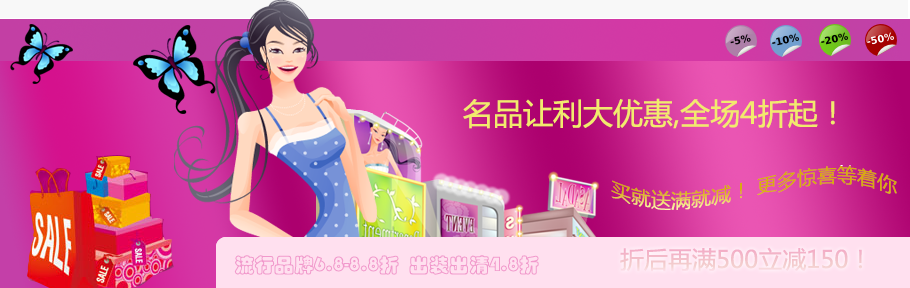
<style>
.page{position:relative;width:910px;height:288px}
.page>*{position:absolute;margin:0}
.t1{font:30px "MicrosoftYaHei";color:#f2ea6d}
.t2{font:20px "MicrosoftYaHei"}
.t3{font:20px "STCaiyun";color:#f199cc}
.t4{font:24px "MicrosoftYaHei";color:#f3c2ca}
</style>
<div class="page">
<p class="t1" style="left:463px;top:98px;width:372px;height:31px">名品让利大优惠,全场4折起！</p>
<p class="t2" style="left:611px;top:165px;width:286px;height:45px">买就送满就减！ 更多惊喜等着你</p>
<p class="t3" style="left:234px;top:255px;width:305px;height:20px">流行品牌6.8-8.8折  出装出清4.8折</p>
<p class="t4" style="left:620px;top:247px;width:242px;height:25px">折后再满500立减150！</p>
</div>
